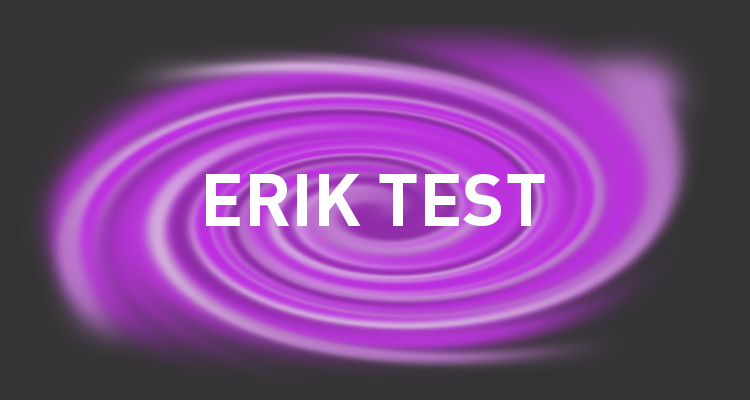
<style>
.page{position:relative;width:750px;height:400px;background:#333333}
.page>*{position:absolute;margin:0}
.t1{font:72px "DINPro-Bold";color:#ffffff}
</style>
<div class="page">
<p class="t1" style="left:206px;top:174px;width:339px;height:52px">ERIK TEST</p>
</div>
